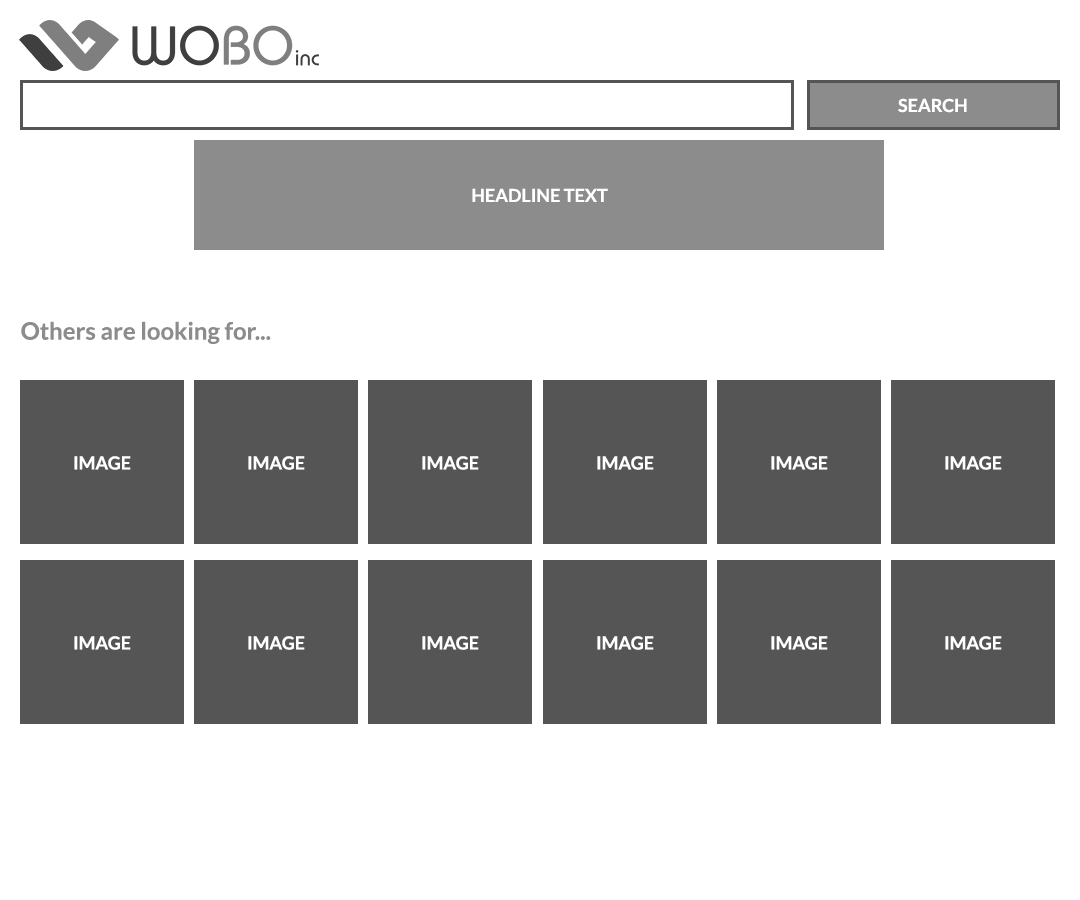
<style>
.page{position:relative;width:1080px;height:900px;background:#ffffff}
.page>*{position:absolute;margin:0}
.t1{font:18px "Lato-Bold";color:#ffffff}
.t2{font:24px "Lato-Bold";color:#8c8c8c}
</style>
<div class="page">
<p class="t1" style="left:898px;top:98px;width:69px;height:15px">SEARCH</p>
<p class="t1" style="left:472px;top:188px;width:136px;height:14px">HEADLINE TEXT</p>
<p class="t2" style="left:21px;top:321px;width:250px;height:23px">Others are looking for...</p>
<p class="t1" style="left:74px;top:456px;width:57px;height:14px">IMAGE</p>
<p class="t1" style="left:248px;top:456px;width:57px;height:14px">IMAGE</p>
<p class="t1" style="left:422px;top:456px;width:57px;height:14px">IMAGE</p>
<p class="t1" style="left:597px;top:456px;width:57px;height:14px">IMAGE</p>
<p class="t1" style="left:771px;top:456px;width:57px;height:14px">IMAGE</p>
<p class="t1" style="left:945px;top:456px;width:57px;height:14px">IMAGE</p>
<p class="t1" style="left:74px;top:636px;width:57px;height:14px">IMAGE</p>
<p class="t1" style="left:248px;top:636px;width:57px;height:14px">IMAGE</p>
<p class="t1" style="left:422px;top:636px;width:57px;height:14px">IMAGE</p>
<p class="t1" style="left:597px;top:636px;width:57px;height:14px">IMAGE</p>
<p class="t1" style="left:771px;top:636px;width:57px;height:14px">IMAGE</p>
<p class="t1" style="left:945px;top:636px;width:57px;height:14px">IMAGE</p>
</div>
